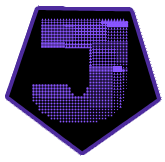
<style>
.page{position:relative;width:165px;height:162px;background:#ffffff}
.page>*{position:absolute;margin:0}
.t1{font:150px "Rubik80sFade-Regular";color:#8955ff}
</style>
<div class="page">
<p class="t1" style="left:32px;top:18px;width:97px;height:105px">J</p>
</div>
